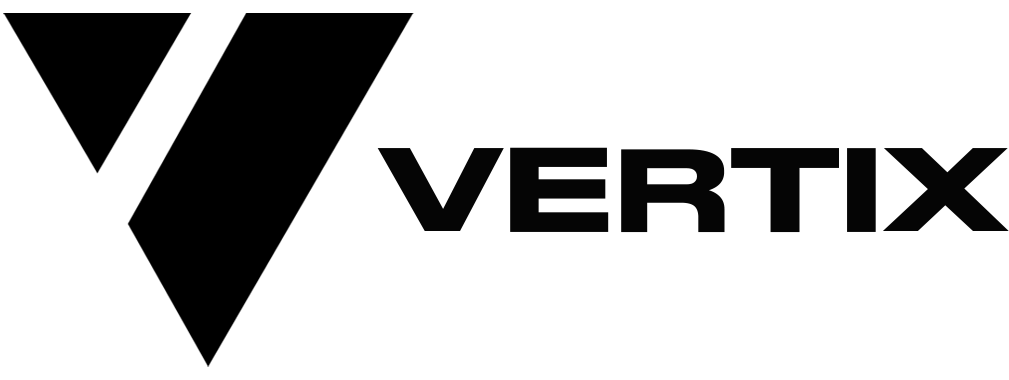
<style>
.page{position:relative;width:1009px;height:380px;background:#ffffff}
.page>*{position:absolute;margin:0}
.t1{font:120px "StretchProRegular";color:#050505}
</style>
<div class="page">
<p class="t1" style="left:377px;top:147px;width:632px;height:86px">VERTIX</p>
</div>
